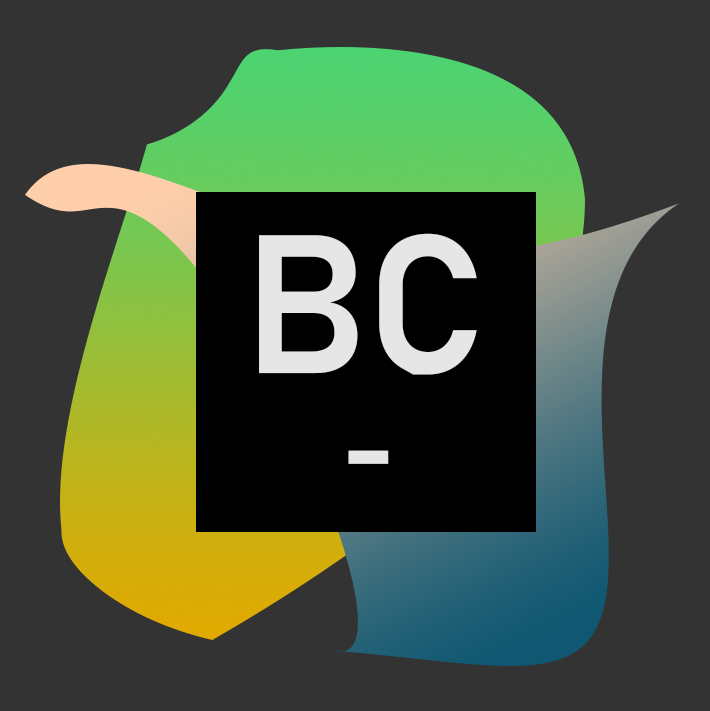
<style>
.page{position:relative;width:710px;height:711px;background:#333333}
.page>*{position:absolute;margin:0}
.t1{font:194.4px "Bahnschrift-SemiBold";color:#e6e6e6}
.t2{font:116.7px "Bahnschrift-SemiBold";color:#e6e6e6}
</style>
<div class="page">
<p class="t1" style="left:259px;top:233px;width:218px;height:142px">BC</p>
<p class="t2" style="left:348px;top:450px;width:41px;height:14px">-</p>
</div>
